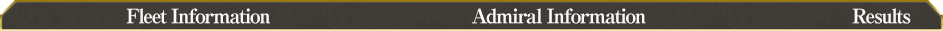
<style>
.page{position:relative;width:943px;height:31px}
.page>*{position:absolute;margin:0}
.t1{font:20px "RyuminPro-ExBold";letter-spacing:-0.08em;color:#fef9f8}
</style>
<div class="page">
<p class="t1" style="left:126px;top:8px;width:785px;height:16px">Fleet Information                                        Admiral Information                                         Results</p>
</div>
